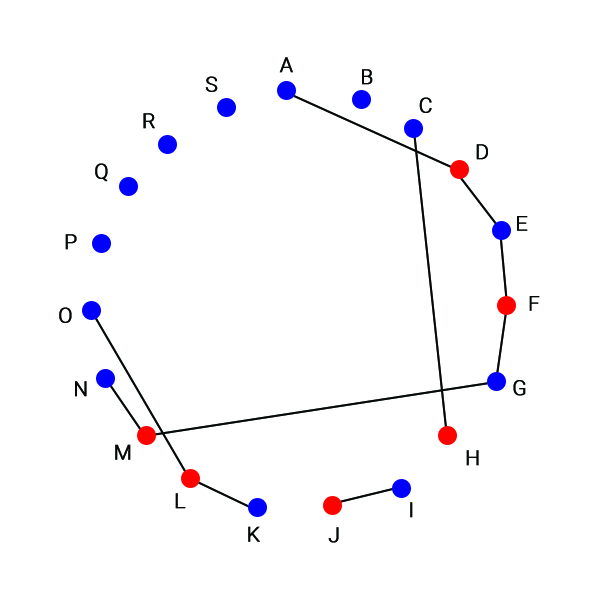
<style>
.page{position:relative;width:600px;height:600px;background:#ffffff}
.page>*{position:absolute;margin:0}
.t1{font:20.8px "Roboto-Light";letter-spacing:0.005em;color:#060808;font-weight:bold}
.t2{font:20.4px "Roboto-Light";letter-spacing:0.005em;color:#060808;font-weight:bold;scale:1.06 1}
.t3{font:20.4px "Roboto-Light";letter-spacing:0.005em;color:#060808;font-weight:bold}
</style>
<div class="page">
<p class="t1" style="left:279px;top:57px;width:14px;height:16px">A</p>
<p class="t1" style="left:205px;top:76px;width:13px;height:16px">S</p>
<p class="t1" style="left:362px;top:69px;width:11px;height:16px">B</p>
<p class="t1" style="left:419px;top:97px;width:13px;height:16px">C</p>
<p class="t1" style="left:143px;top:113px;width:12px;height:16px">R</p>
<p class="t1" style="left:476px;top:144px;width:12px;height:16px">D</p>
<p class="t1" style="left:95px;top:163px;width:13px;height:19px">Q</p>
<p class="t2" style="left:517px;top:216px;width:11px;height:15px">E</p>
<p class="t1" style="left:65px;top:234px;width:12px;height:16px">P</p>
<p class="t3" style="left:529px;top:296px;width:11px;height:15px">F</p>
<p class="t1" style="left:59px;top:307px;width:13px;height:16px">O</p>
<p class="t1" style="left:75px;top:381px;width:12px;height:16px">N</p>
<p class="t1" style="left:513px;top:380px;width:13px;height:16px">G</p>
<p class="t1" style="left:115px;top:444px;width:16px;height:16px">M</p>
<p class="t1" style="left:466px;top:450px;width:13px;height:16px">H</p>
<p class="t1" style="left:175px;top:493px;width:11px;height:16px">L</p>
<p class="t1" style="left:410px;top:502px;width:3px;height:16px">I</p>
<p class="t1" style="left:248px;top:526px;width:12px;height:16px">K</p>
<p class="t1" style="left:328px;top:527px;width:11px;height:16px">J</p>
</div>
